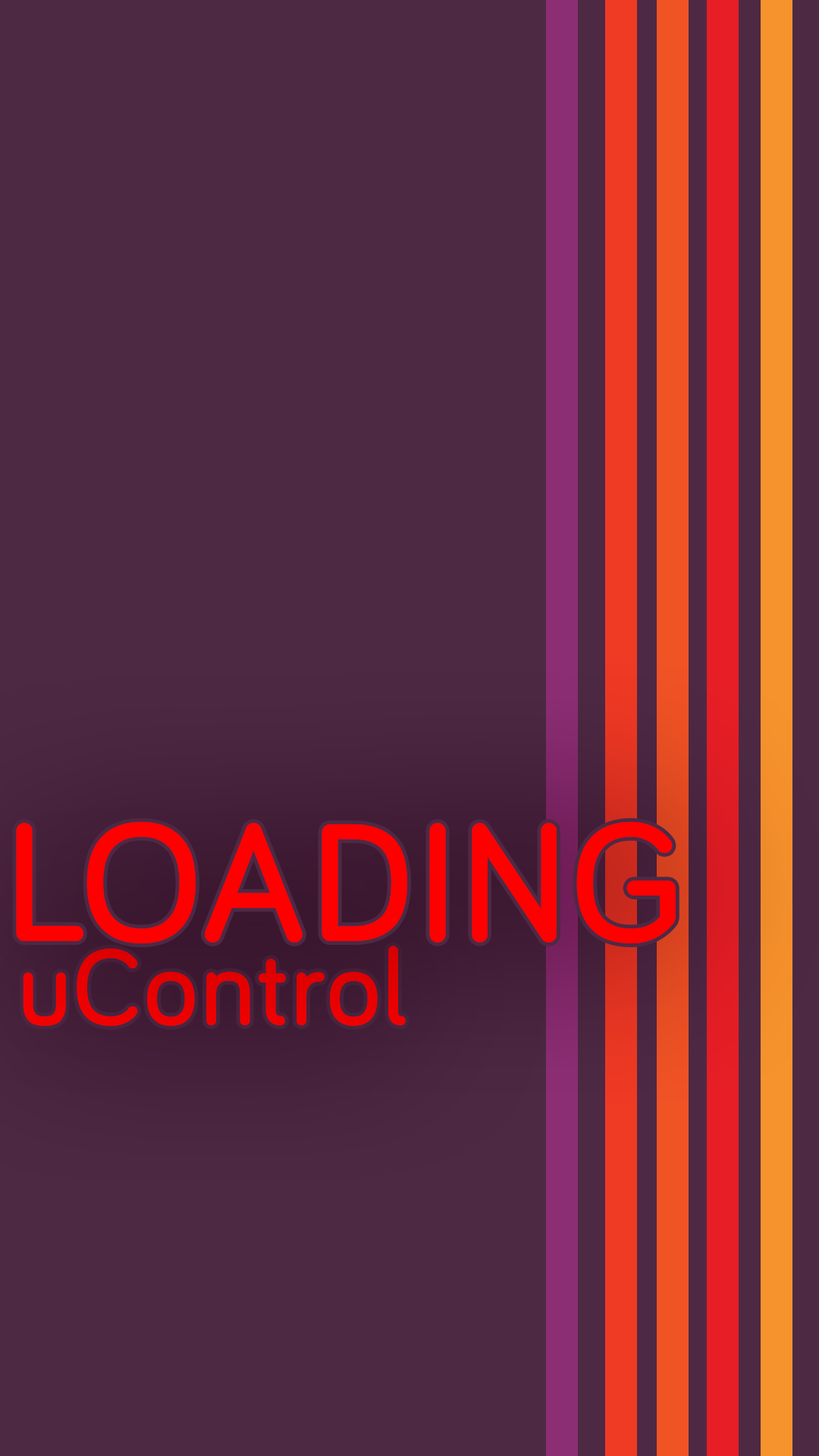
<style>
.page{position:relative;width:819px;height:1456px;background:#4e2944}
.page>*{position:absolute;margin:0}
.t1{font:166.8px "Bariol-Regular";letter-spacing:0.01em;color:#ff0000;font-weight:bold}
.t2{font:106.2px "Bariol-Regular";letter-spacing:0.01em;color:#e90000;font-weight:bold}
</style>
<div class="page">
<p class="t1" style="left:16px;top:821px;width:660px;height:123px">LOADING</p>
<p class="t2" style="left:23px;top:946px;width:383px;height:80px">uControl</p>
</div>
